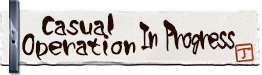
<style>
.page{position:relative;width:262px;height:75px;background:#ffffff}
.page>*{position:absolute;margin:0}
.t1{font:30px/20px "TA_taoyame";letter-spacing:-0.1em;color:#240c00;font-weight:bold}
.t2{font:36px "TA_taoyame";letter-spacing:-0.16em;color:#240c00;font-weight:bold;scale:0.62 1}
</style>
<div class="page">
<p class="t1" style="left:22px;top:13px;width:114px;height:48px;text-align:center">Casual<br>Operation</p>
<p class="t2" style="left:139px;top:19px;width:96px;height:36px">In Progress</p>
</div>
